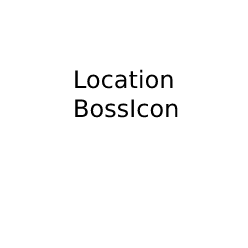
<style>
.page{position:relative;width:248px;height:248px;background:#ffffff}
.page>*{position:absolute;margin:0}
.t1{font:24px "DejaVuSans";color:#000000}
</style>
<div class="page">
<p class="t1" style="left:75px;top:69px;width:103px;height:49px">Location <br>BossIcon</p>
</div>
